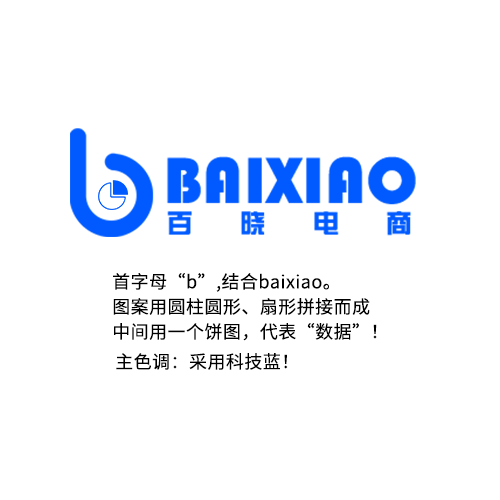
<style>
.page{position:relative;width:500px;height:500px;background:#ffffff}
.page>*{position:absolute;margin:0}
.t1{font:18px/25px "SourceHanSansCN-Regular";letter-spacing:0.025em;color:#000000}
.t2{font:18px "SourceHanSansCN-Regular";letter-spacing:0.025em;color:#000000}
</style>
<div class="page">
<p class="t1" style="left:113px;top:273px;width:264px;height:68px">首字母“b”,结合baixiao。<br>图案用圆柱圆形、扇形拼接而成<br>中间用一个饼图，代表“数据”！</p>
<p class="t2" style="left:116px;top:353px;width:172px;height:17px">主色调：采用科技蓝！</p>
</div>
